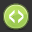
<style>
.page{position:relative;width:32px;height:32px;background:#333333}
.page>*{position:absolute;margin:0}
.t1{font:28.4px "Arial-ItalicMT";letter-spacing:-0.04em;color:#ffffff;scale:0.4 1}
</style>
<div class="page">
<p class="t1" style="left:9px;top:10px;width:15px;height:13px">&lt; &gt;</p>
</div>
